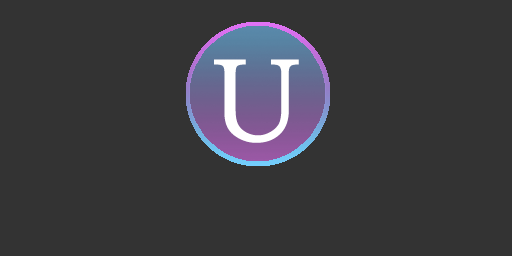
<style>
.page{position:relative;width:512px;height:256px;background:#333333}
.page>*{position:absolute;margin:0}
.t1{font:120px "STZhongsong";color:#ffffff}
</style>
<div class="page">
<p class="t1" style="left:214px;top:59px;width:85px;height:84px">U</p>
</div>
